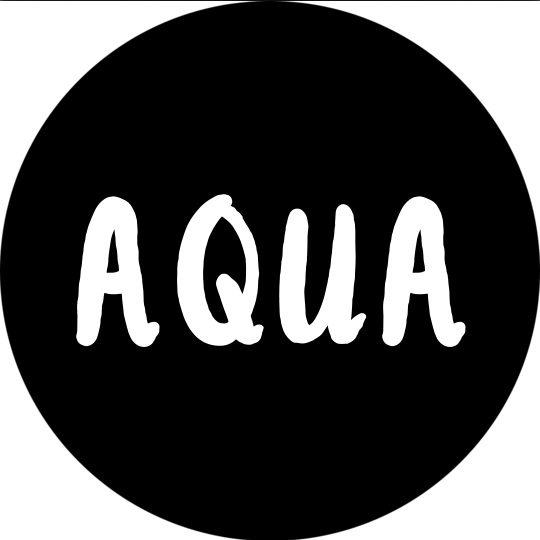
<style>
.page{position:relative;width:540px;height:540px;background:#000000}
.page>*{position:absolute;margin:0}
.t1{font:200px "F...SAINT-TROPEZ";letter-spacing:0.04em;color:#ffffff;font-weight:bold}
</style>
<div class="page">
<p class="t1" style="left:76px;top:193px;width:390px;height:153px">AQUA</p>
</div>
